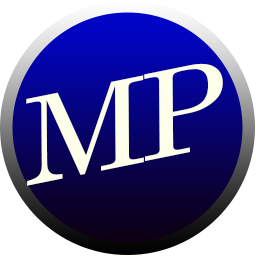
<style>
.page{position:relative;width:256px;height:256px;background:#ffffff}
.page>*{position:absolute;margin:0}
.t1{font:119.7px "Century";letter-spacing:-0.06em;color:#ffffea;scale:1.1 1}
</style>
<div class="page">
<p class="t1" style="left:26px;top:63px;width:197px;height:123px;rotate:-11deg">MP</p>
</div>
